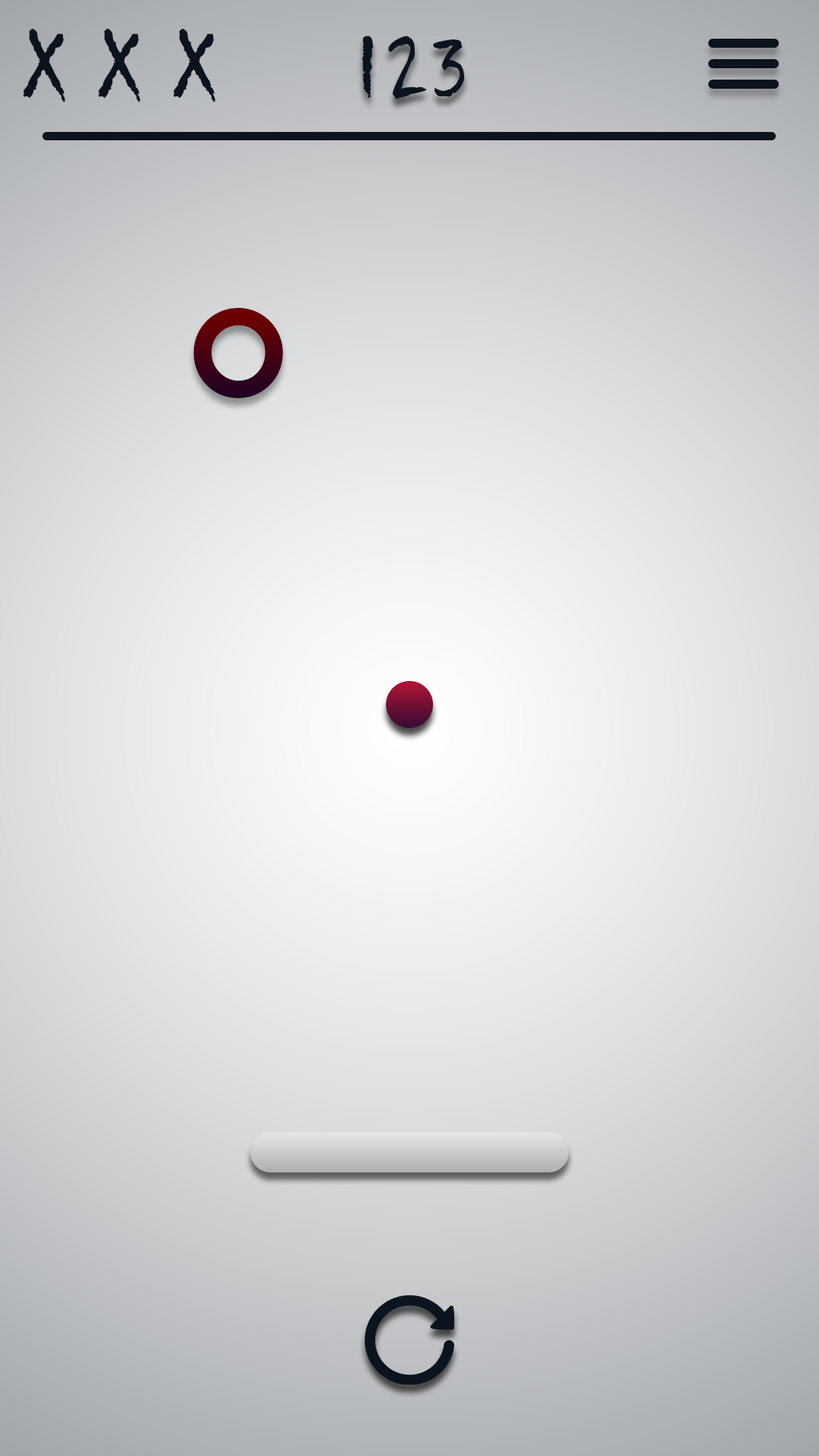
<style>
.page{position:relative;width:819px;height:1456px}
.page>*{position:absolute;margin:0}
.t1{font:87.2px "Quikhand";letter-spacing:0.05em;color:#0b141e;text-transform:uppercase}
.t2{font:121.9px "AvantGardeITCbyBT-Demi";letter-spacing:0.04em}
</style>
<div class="page">
<p class="t1" style="left:23px;top:28px;width:192px;height:74px">x x x</p>
<p class="t1" style="left:362px;top:36px;width:102px;height:63px">123</p>
<p class="t2" style="left:193px;top:308px;width:90px;height:90px">O</p>
</div>
